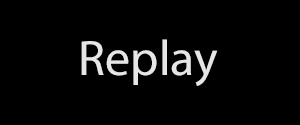
<style>
.page{position:relative;width:300px;height:125px;background:#000000}
.page>*{position:absolute;margin:0}
.t1{font:50px "MyriadPro-Regular";color:#e6e6e6}
</style>
<div class="page">
<p class="t1" style="left:81px;top:39px;width:137px;height:47px">Replay</p>
</div>
